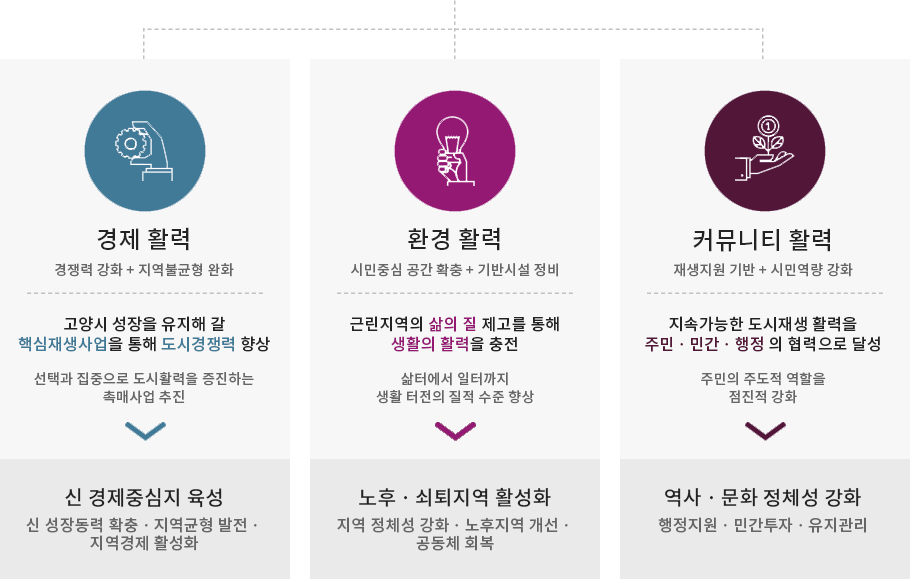
<style>
.page{position:relative;width:910px;height:579px;background:#f7f7f7}
.page>*{position:absolute;margin:0}
.t1{font:24px "NotoSansKR-Medium";letter-spacing:0.02em;color:#232323}
.t2{font:14px "NotoSansKR-Medium";letter-spacing:0.02em;color:#666666}
.t3{font:16px/20px "NotoSansKR-Medium";letter-spacing:0.02em;color:#232323}
.t4{font:16px/20px "NotoSansKR-Medium";letter-spacing:0.02em;color:#417a96}
.t5{font:16px/20px "NotoSansKR-Medium";letter-spacing:0.02em;color:#941973}
.t6{font:16px/20px "NotoSansKR-Medium";letter-spacing:0.02em;color:#521738}
.t7{font:14px/18px "NotoSansKR-Medium";letter-spacing:0.02em;color:#666666}
.t8{font:20px "NotoSansKR-Medium";letter-spacing:0.02em;color:#232323}
.t9{font:16px/18px "NotoSansKR-Medium";letter-spacing:0.02em;color:#666666}
.t10{font:16px "NotoSansKR-Medium";letter-spacing:0.02em;color:#666666}
</style>
<div class="page">
<p class="t1" style="left:97px;top:227px;width:92px;height:24px">경제 활력</p>
<p class="t1" style="left:408px;top:227px;width:92px;height:24px">환경 활력</p>
<p class="t1" style="left:693px;top:228px;width:137px;height:24px">커뮤니티 활력</p>
<p class="t2" style="left:55px;top:263px;width:179px;height:14px">경쟁력 강화 + 지역불균형 완화</p>
<p class="t2" style="left:351px;top:263px;width:207px;height:14px">시민중심 공간 확충 + 기반시설 정비</p>
<p class="t2" style="left:673px;top:263px;width:180px;height:14px">재생지원 기반 + 시민역량 강화</p>
<p class="t3" style="left:18px;top:316px;width:252px;height:36px;text-align:center">고양시 성장을 유지해 갈<br><span class="t4">핵심재생사업</span>을 통해 <span class="t4">도시경쟁력</span> 향상</p>
<p class="t3" style="left:350px;top:316px;width:209px;height:36px;text-align:center">근린지역의 <span class="t5">삶의 질</span> 제고를 통해<br><span class="t5">생활의 활력</span>을 충전</p>
<p class="t3" style="left:645px;top:316px;width:235px;height:36px;text-align:center">지속가능한 도시재생 활력을<br><span class="t6">주민ㆍ민간ㆍ행정 </span>의 협력으로 달성</p>
<p class="t7" style="left:34px;top:372px;width:220px;height:32px;text-align:center">선택과 집중으로 도시활력을 증진하는<br>촉매사업 추진</p>
<p class="t7" style="left:376px;top:372px;width:158px;height:32px;text-align:center">삶터에서 일터까지<br>생활 터전의 질적 수준 향상</p>
<p class="t7" style="left:701px;top:372px;width:125px;height:32px;text-align:center">주민의 주도적 역할을<br>점진적 강화</p>
<p class="t8" style="left:65px;top:488px;width:157px;height:20px">신 경제중심지 육성</p>
<p class="t8" style="left:359px;top:487px;width:192px;height:20px">노후ㆍ쇠퇴지역 활성화</p>
<p class="t8" style="left:665px;top:488px;width:196px;height:19px">역사ㆍ문화 정체성 강화</p>
<p class="t9" style="left:26px;top:517px;width:231px;height:34px;text-align:center">신 성장동력 확충ㆍ지역균형 발전ㆍ<br>지역경제 활성화</p>
<p class="t9" style="left:337px;top:517px;width:231px;height:34px;text-align:center">지역 정체성 강화ㆍ노후지역 개선ㆍ<br>공동체 회복</p>
<p class="t10" style="left:658px;top:517px;width:208px;height:16px">행정지원ㆍ민간투자ㆍ유지관리</p>
</div>
